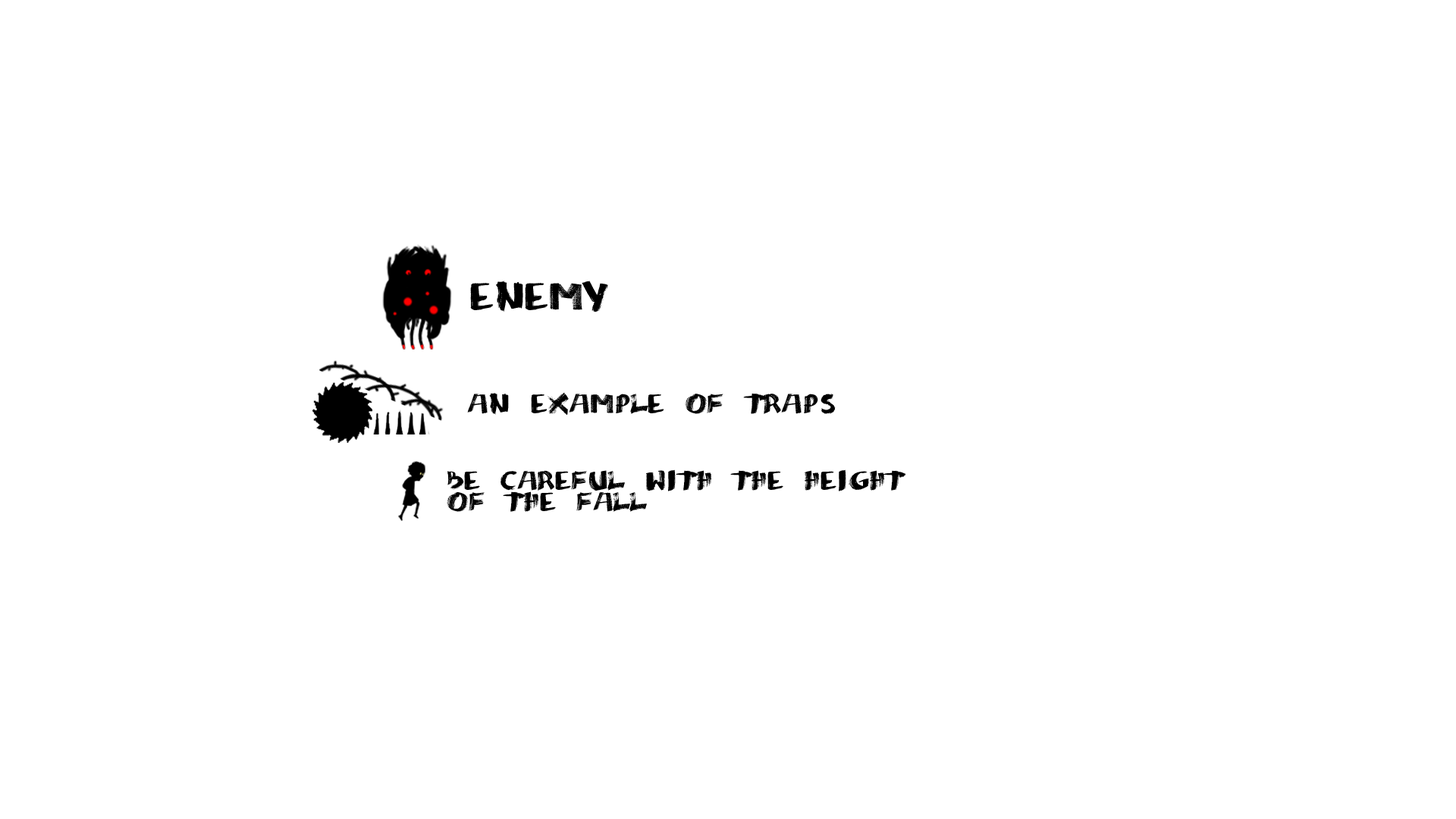
<style>
.page{position:relative;width:1456px;height:819px;background:#ffffff}
.page>*{position:absolute;margin:0}
.t1{font:39px "mazak";letter-spacing:-0.22em;color:#000000}
.t2{font:27.3px "mazak";letter-spacing:-0.22em;color:#000000}
.t3{font:26.5px/21.2px "mazak";letter-spacing:-0.22em;color:#000000}
</style>
<div class="page">
<p class="t1" style="left:470px;top:281px;width:138px;height:31px">enemy</p>
<p class="t2" style="left:467px;top:392px;width:369px;height:23px">an example of traps</p>
<p class="t3" style="left:447px;top:469px;width:459px;height:43px">be careful with the height <br>of the fall</p>
</div>
